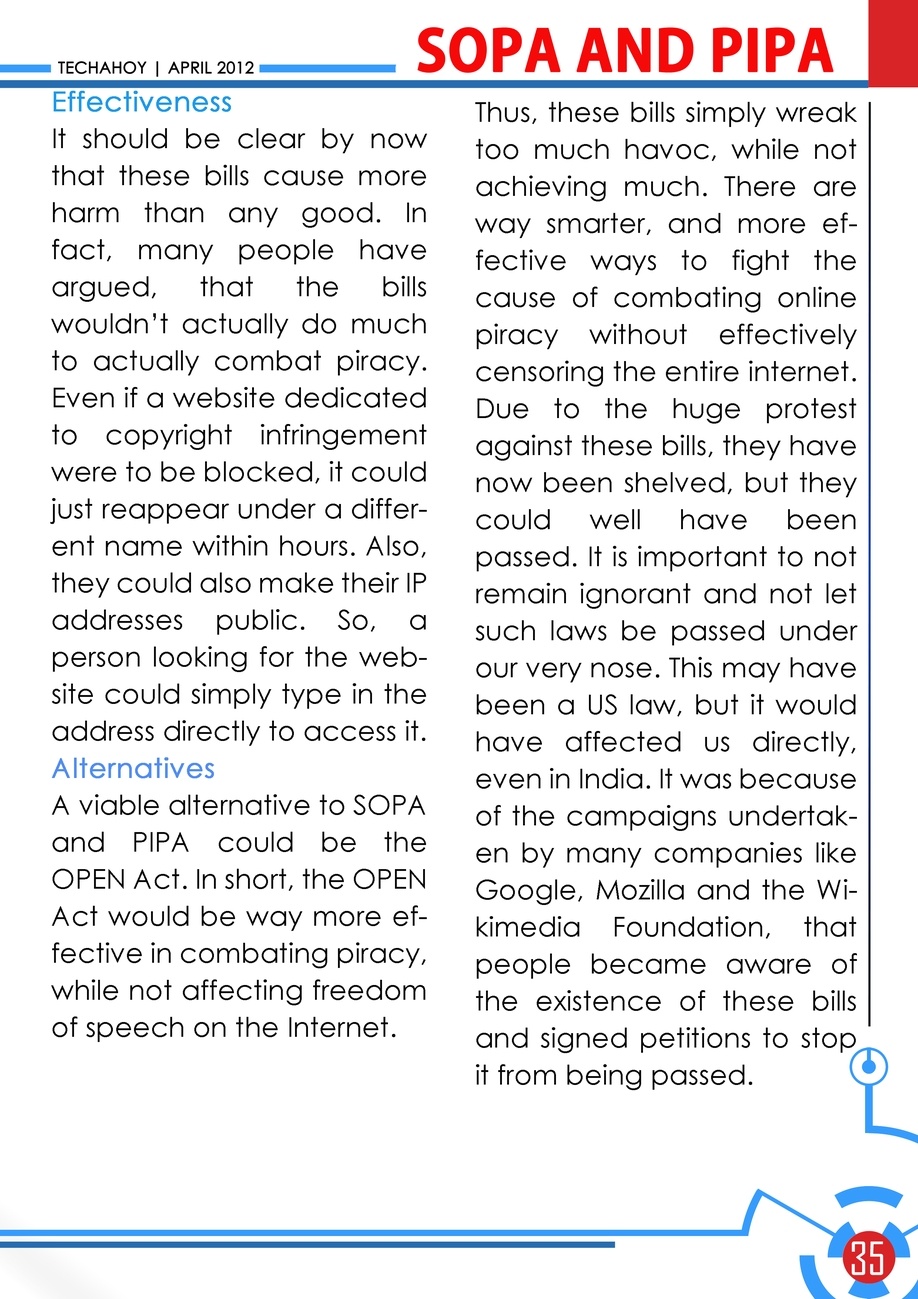
<style>
.page{position:relative;width:918px;height:1299px;background:#ffffff}
.page>*{position:absolute;margin:0}
.t1{font:55.5px "AdobeGothicStd-Bold";color:#f50909;text-transform:uppercase;font-weight:bold}
.t2{font:16px "CenturyGothic";color:#000000;text-transform:uppercase;font-weight:bold}
.t3{font:27.5px/37px "CenturyGothic";color:#080808}
.t4{font:27.5px/37px "CenturyGothic";color:#1d9ae9;font-weight:bold}
.t5{font:27.5px/37px "CenturyGothic";color:#518df2;font-weight:bold}
.t6{font:43.7px "AgencyFB-Reg";color:#ffffff;text-transform:uppercase}
</style>
<div class="page">
<p class="t1" style="left:418px;top:27px;width:416px;height:46px">sopa and pipa</p>
<p class="t2" style="left:58px;top:61px;width:196px;height:16px">techahoy | APRIL 2012</p>
<p class="t3" style="left:50px;top:91px;width:377px;height:951px;text-align:justify"><span class="t4">Effectiveness<br></span>It should be clear by now that these bills cause more harm than any good. In fact, many people have argued, that the bills wouldn’t actually do much to actually combat piracy. Even if a website dedicated to copyright infringement were to be blocked, it could just reappear under a different name within hours. Also, they could also make their IP addresses public. So, a person looking for the website could simply type in the address directly to access it. <br><span class="t5">Alternatives<br></span>A viable alternative to SOPA and PIPA could be the OPEN Act. In short, the OPEN Act would be way more effective in combating piracy, while not affecting freedom of speech on the Internet.</p>
<p class="t3" style="left:475px;top:101px;width:383px;height:989px;text-align:justify">Thus, these bills simply wreak too much havoc, while not achieving much. There are way smarter, and more effective ways to fight the cause of combating online piracy without effectively censoring the entire internet. Due to the huge protest against these bills, they have now been shelved, but they could well have been passed. It is important to not remain ignorant and not let such laws be passed under our very nose. This may have been a US law, but it would have affected us directly, even in India. It was because of the campaigns undertaken by many companies like Google, Mozilla and the Wikimedia Foundation, that people became aware of the existence of these bills and signed petitions to stop it from being passed.</p>
<p class="t6" style="left:852px;top:1241px;width:31px;height:34px">35</p>
</div>
